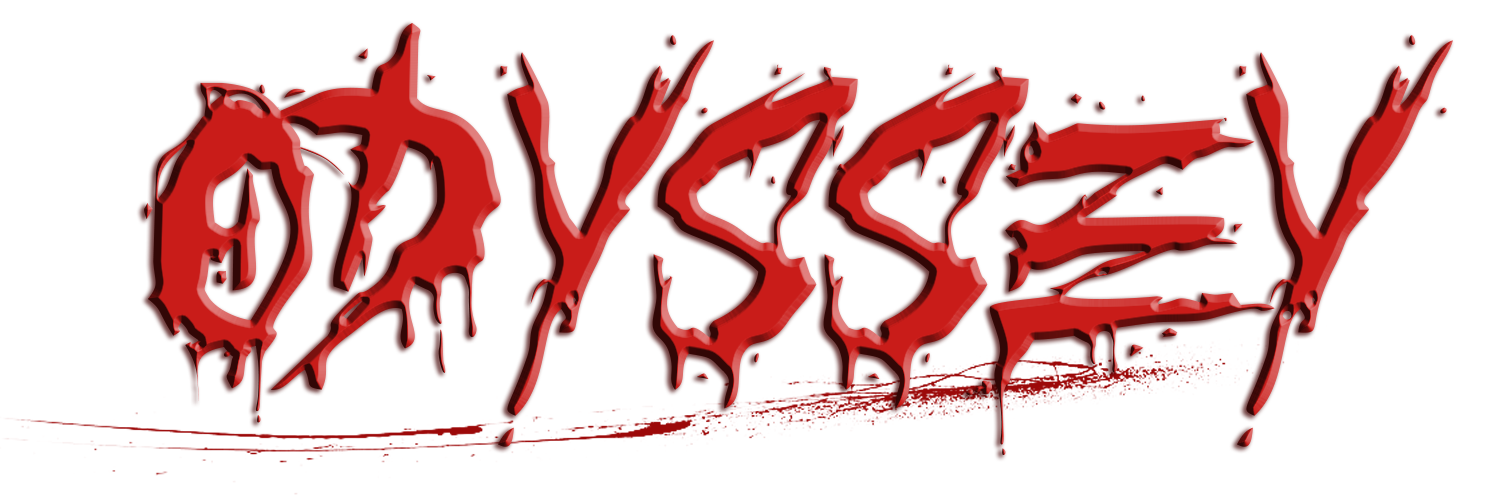
<style>
.page{position:relative;width:1485px;height:496px;background:#ffffff}
.page>*{position:absolute;margin:0}
.t1{font:666.7px "ZOMBIESREBORN"}
</style>
<div class="page">
<p class="t1" style="left:144px;top:22px;width:1310px;height:434px">Odyssey</p>
</div>
